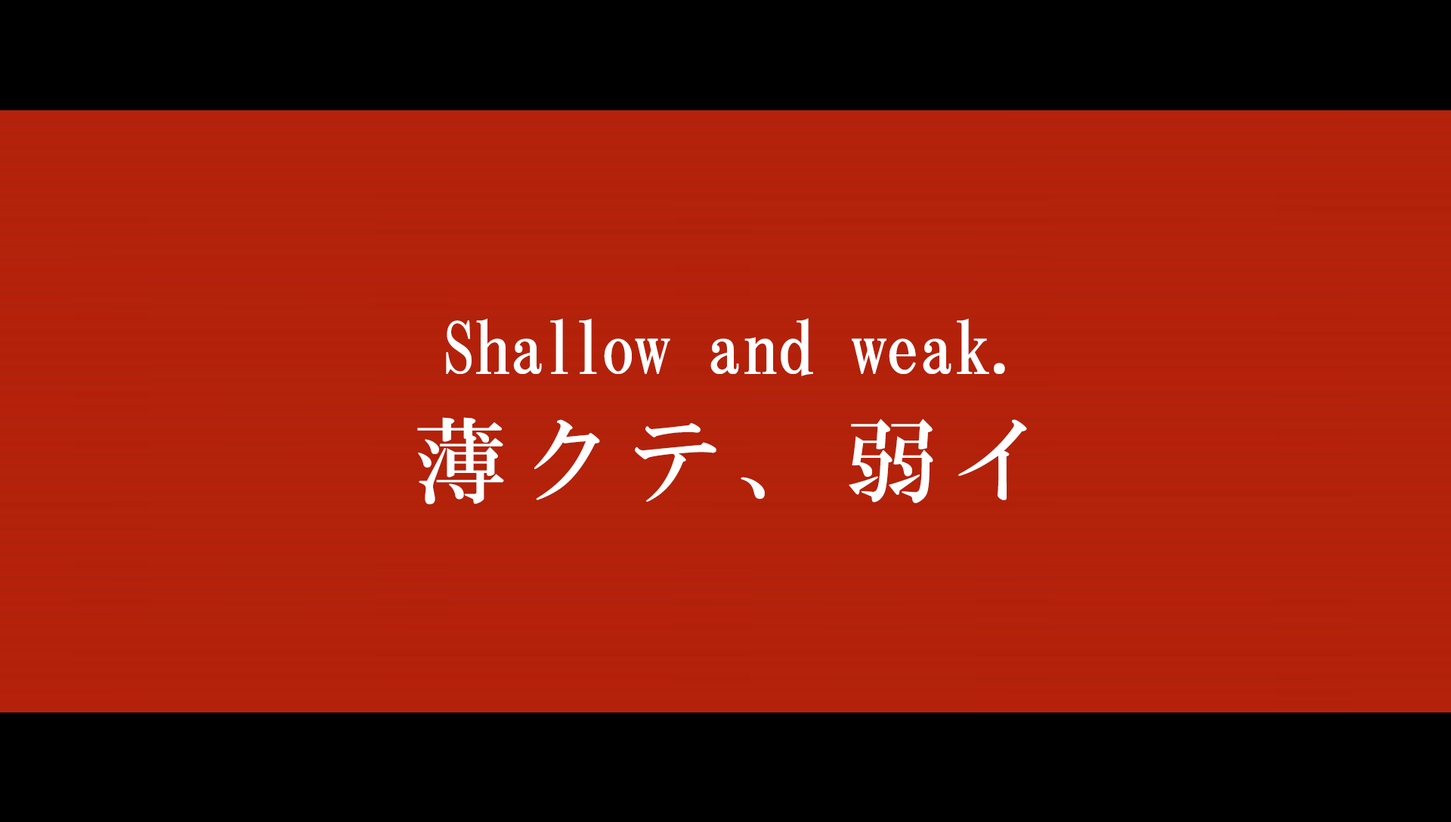
<style>
.page{position:relative;width:1451px;height:822px;background:#000000}
.page>*{position:absolute;margin:0}
.t1{font:72.5px "HGMinchoB";color:#ffffff}
.t2{font:92.2px "HGMinchoB";letter-spacing:0.17em;color:#fffeff}
</style>
<div class="page">
<p class="t1" style="left:446px;top:318px;width:559px;height:58px">Shallow and weak.</p>
<p class="t2" style="left:417px;top:417px;width:610px;height:88px">薄クテ、弱イ</p>
</div>
